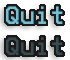
<style>
.page{position:relative;width:70px;height:60px;background:#1a1a1a}
.page>*{position:absolute;margin:0}
.t1{font:20px "VHSGothic";color:#73bed3}
</style>
<div class="page">
<p class="t1" style="left:6px;top:6px;width:57px;height:18px">Quit</p>
</div>
